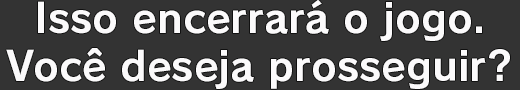
<style>
.page{position:relative;width:520px;height:90px;background:#333333}
.page>*{position:absolute;margin:0}
.t1{font:40px "RodinPro-B";color:#fbfafb}
</style>
<div class="page">
<p class="t1" style="left:6px;top:0px;width:504px;height:89px;text-align:center">Isso encerrará o jogo.<br>Você deseja prosseguir?</p>
</div>
